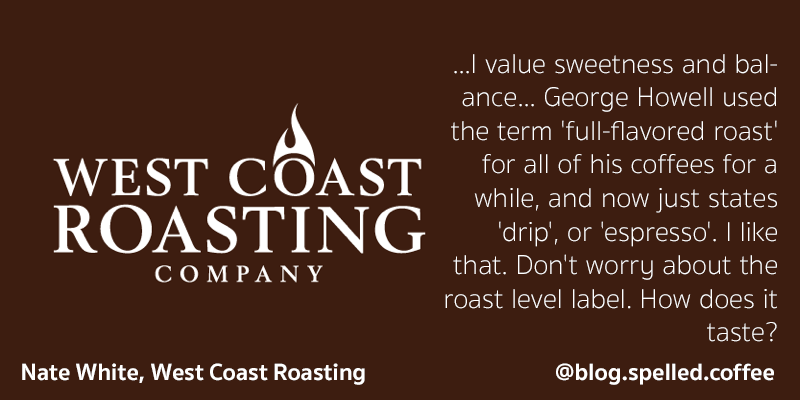
<style>
.page{position:relative;width:800px;height:400px;background:#3d1d10}
.page>*{position:absolute;margin:0}
.t1{font:28px "SukhumvitSet-Thin";color:#ffffff}
.t2{font:24px "SukhumvitSet-Bold";color:#ffffff}
</style>
<div class="page">
<p class="t1" style="left:445px;top:54px;width:332px;height:288px;text-align:right">...I value sweetness and balance... George Howell used the term 'full-flavored roast' for all of his coffees for a while, and now just states 'drip', or 'espresso'. I like that. Don't worry about the roast level label. How does it taste?</p>
<p class="t2" style="left:22px;top:363px;width:343px;height:22px">Nate White, West Coast Roasting</p>
<p class="t2" style="left:556px;top:363px;width:218px;height:22px">@blog.spelled.coffee</p>
</div>
